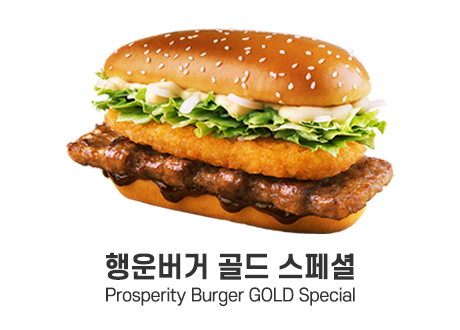
<style>
.page{position:relative;width:460px;height:330px;background:#ffffff}
.page>*{position:absolute;margin:0}
.t1{font:17.5px/24px "S-CoreDream-4Regular";letter-spacing:-0.02em;color:#333333}
.t2{font:28px/24px "S-CoreDream-6Bold";letter-spacing:-0.02em;color:#333333}
</style>
<div class="page">
<p class="t1" style="left:106px;top:252px;width:249px;height:54px;text-align:center"><span class="t2">행운버거 골드 스페셜<br></span>Prosperity Burger GOLD Special</p>
</div>
